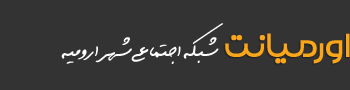
<style>
.page{position:relative;width:350px;height:90px;background:#333333}
.page>*{position:absolute;margin:0}
.t1{font:31.2px "Mj_Sayeh-1-";color:#ffffff}
.t2{font:46.2px "Mj_Maveddat-Black";color:#faa61a}
</style>
<div class="page">
<p class="t1" style="left:61px;top:23px;width:163px;height:41px">شبکه اجتماعی شهر ارومیه</p>
<p class="t2" style="left:225px;top:33px;width:125px;height:31px">اورميانت</p>
</div>
